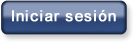
<style>
.page{position:relative;width:137px;height:44px}
.page>*{position:absolute;margin:0}
.t1{font:14.9px "ArialMT";letter-spacing:0.05em;color:#ffffff;font-weight:bold;scale:1.06 1}
</style>
<div class="page">
<p class="t1" style="left:12px;top:10px;width:104px;height:12px">Iniciar sesión</p>
</div>
